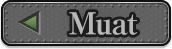
<style>
.page{position:relative;width:172px;height:49px}
.page>*{position:absolute;margin:0}
.t1{font:30px "RyuminPro-ExBold";letter-spacing:-0.04em;color:#b8b8b8}
</style>
<div class="page">
<p class="t1" style="left:69px;top:12px;width:69px;height:23px">Muat</p>
</div>
